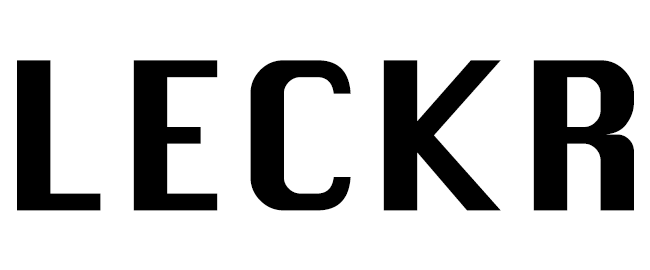
<style>
.page{position:relative;width:650px;height:270px;background:#ffffff}
.page>*{position:absolute;margin:0}
.t1{font:200px "Krungthep";color:#000000}
</style>
<div class="page">
<p class="t1" style="left:17px;top:60px;width:617px;height:151px">LECKR</p>
</div>
